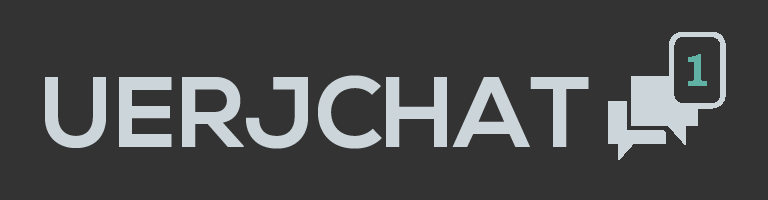
<style>
.page{position:relative;width:768px;height:200px;background:#333333}
.page>*{position:absolute;margin:0}
.t1{font:100px "NexaBold";color:#ccd5d9}
</style>
<div class="page">
<p class="t1" style="left:45px;top:75px;width:544px;height:74px">UERJCHAT</p>
</div>
